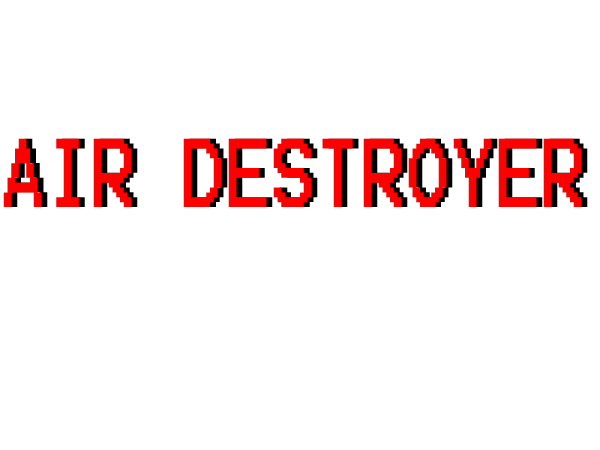
<style>
.page{position:relative;width:600px;height:450px;background:#ffffff}
.page>*{position:absolute;margin:0}
.t1{font:78px "Terminal";color:#ff0000;scale:0.77 1}
.t2{font:78px "Terminal";scale:0.77 1}
</style>
<div class="page">
<p class="t1" style="left:3px;top:138px;width:579px;height:69px">AIR DESTROYER</p>
<p class="t2" style="left:9px;top:138px;width:579px;height:69px">AIR DESTROYER</p>
</div>
